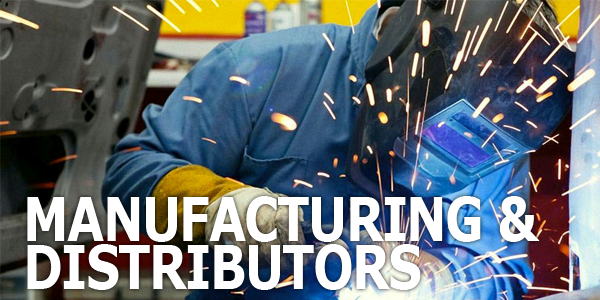
<style>
.page{position:relative;width:600px;height:300px}
.page>*{position:absolute;margin:0}
.t1{font:60.5px/48px "Verdana-Bold";letter-spacing:-0.04em;color:#ffffff;scale:0.8 1}
</style>
<div class="page">
<p class="t1" style="left:27px;top:196px;width:513px;height:94px">MANUFACTURING &amp;<br>DISTRIBUTORS</p>
</div>
